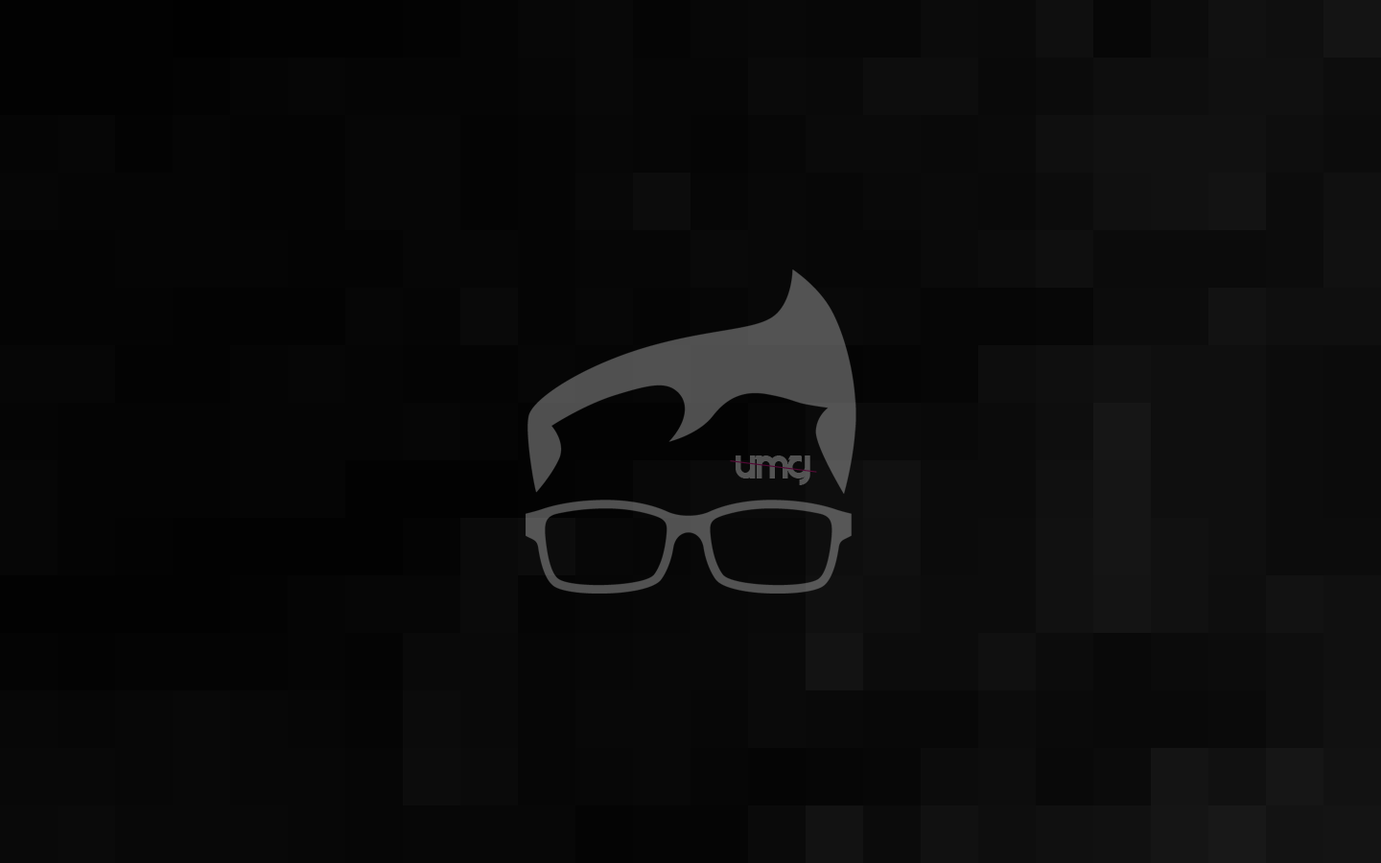
<style>
.page{position:relative;width:1381px;height:863px}
.page>*{position:absolute;margin:0}
.t1{font:32.4px "Velocity";color:#545454}
</style>
<div class="page">
<p class="t1" style="left:736px;top:456px;width:75px;height:29px">umg</p>
</div>
